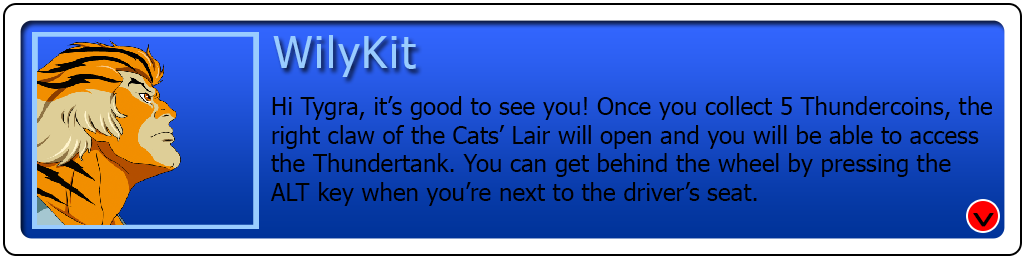
<style>
.page{position:relative;width:1024px;height:260px}
.page>*{position:absolute;margin:0}
.t1{font:43.9px "Tahoma";letter-spacing:0.04em;color:#99ccff}
.t2{font:24px "Tahoma";color:#000000}
.t3{font:32.7px "Tahoma";letter-spacing:0.04em;color:#000000;font-weight:bold}
</style>
<div class="page">
<p class="t1" style="left:273px;top:35px;width:143px;height:42px">WilyKit</p>
<p class="t2" style="left:271px;top:96px;width:721px;height:110px">Hi Tygra, it’s good to see you! Once you collect 5 Thundercoins, the<br>right claw of the Cats’ Lair will open and you will be able to access<br>the Thundertank. You can get behind the wheel by pressing the<br>ALT key when you’re next to the driver’s seat.</p>
<p class="t3" style="left:973px;top:213px;width:21px;height:14px;rotate:180deg">^</p>
</div>
